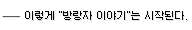
<style>
.page{position:relative;width:192px;height:30px;background:#ffffff}
.page>*{position:absolute;margin:0}
.t1{font:10px "Galmuri9-Regular";color:#000000}
</style>
<div class="page">
<p class="t1" style="left:25px;top:11px;width:163px;height:9px">이렇게 "방랑자 이야기"는 시작된다.</p>
</div>
